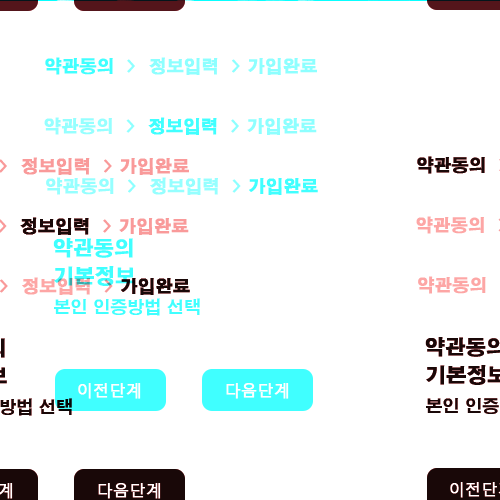
<style>
.page{position:relative;width:500px;height:500px;background:#ffffff}
.page>*{position:absolute;margin:0}
.t1{font:17px "H2gtrE";font-weight:bold}
.t2{font:20px "H2gtrE";font-weight:bold}
.t3{font:17px "H2gtrE"}
.t4{font:16px "MalgunGothic";font-weight:bold}
</style>
<div class="page">
<p class="t1" style="left:45px;top:56px;width:272px;height:18px">약관동의  &gt;  정보입력  &gt; 가입완료</p>
<p class="t1" style="left:44px;top:116px;width:273px;height:18px">약관동의  &gt;  정보입력  &gt; 가입완료</p>
<p class="t1" style="left:46px;top:176px;width:272px;height:18px">약관동의  &gt;  정보입력  &gt; 가입완료</p>
<p class="t2" style="left:53px;top:237px;width:80px;height:20px">약관동의</p>
<p class="t2" style="left:54px;top:265px;width:81px;height:20px">기본정보</p>
<p class="t3" style="left:54px;top:297px;width:146px;height:18px">본인 인증방법 선택</p>
<p class="t4" style="left:78px;top:382px;width:63px;height:16px">이전단계</p>
<p class="t4" style="left:226px;top:382px;width:63px;height:16px">다음단계</p>
</div>
